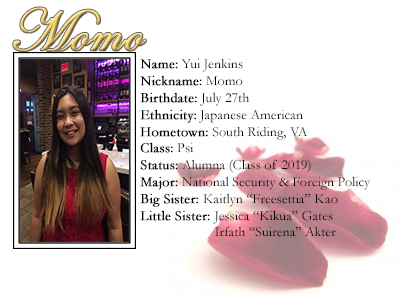
<style>
.page{position:relative;width:400px;height:300px;background:#ffffff}
.page>*{position:absolute;margin:0}
.t1{font:60px "EdwardianScriptITC";font-weight:bold}
.t2{font:14px "Garamond";color:#000000}
.t3{font:14px "Garamond";color:#000000;font-weight:bold}
.t4{font:14px "Garamond";color:#ffffff;font-weight:bold}
</style>
<div class="page">
<p class="t1" style="left:13px;top:7px;width:133px;height:44px">Momo</p>
<p class="t2" style="left:140px;top:58px;width:231px;height:179px"><span class="t3">Name:</span> Yui Jenkins<br><span class="t3">Nickname:</span> Momo<br><span class="t3">Birthdate:</span> July 27th<br><span class="t3">Ethnicity:</span> Japanese American<br><span class="t3">Hometown:</span> South Riding, VA<br><span class="t3">Class:</span> Psi<br><span class="t3">Status:</span> Alumna (Class of 2019)<br><span class="t3">Major:</span> National Security &amp; Foreign Policy<br><span class="t3">Big Sister: </span>Kaitlyn “Freesettia” Kao<br><span class="t3">Little Sister: </span>Jessica “Kikua” Gates<br><span class="t4">Little Sister: </span>Irfath “Suirena” Akter</p>
</div>
